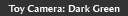
<style>
.page{position:relative;width:128px;height:16px;background:#333333}
.page>*{position:absolute;margin:0}
.t1{font:9.6px "AmiraParadiso";letter-spacing:0.05em;color:#ffffff}
</style>
<div class="page">
<p class="t1" style="left:8px;top:5px;width:112px;height:9px">Toy Camera: Dark Green</p>
</div>
